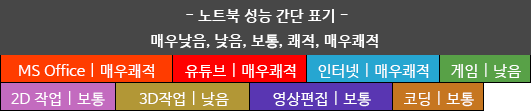
<style>
.page{position:relative;width:531px;height:111px;background:#474747}
.page>*{position:absolute;margin:0}
.t1{font:15px/24.8px "HanSantteutDotumBold";color:#ffffff}
.t2{font:15px "HancomGothicRegular";color:#ffffff}
</style>
<div class="page">
<p class="t1" style="left:151px;top:9px;width:227px;height:40px;text-align:center">- 노트북 성능 간단 표기 -<br>매우낮음, 낮음, 보통, 쾌적, 매우쾌적</p>
<p class="t2" style="left:19px;top:63px;width:135px;height:15px">MS Office | 매우쾌적</p>
<p class="t2" style="left:185px;top:63px;width:111px;height:15px">유튜브 | 매우쾌적</p>
<p class="t2" style="left:318px;top:63px;width:111px;height:15px">인터넷 | 매우쾌적</p>
<p class="t2" style="left:451px;top:63px;width:70px;height:15px">게임 | 낮음</p>
<p class="t2" style="left:11px;top:91px;width:94px;height:16px">2D 작업 | 보통</p>
<p class="t2" style="left:139px;top:91px;width:90px;height:15px">3D작업 | 낮음</p>
<p class="t2" style="left:273px;top:91px;width:98px;height:16px">영상편집 | 보통</p>
<p class="t2" style="left:404px;top:91px;width:70px;height:16px">코딩 | 보통</p>
</div>
